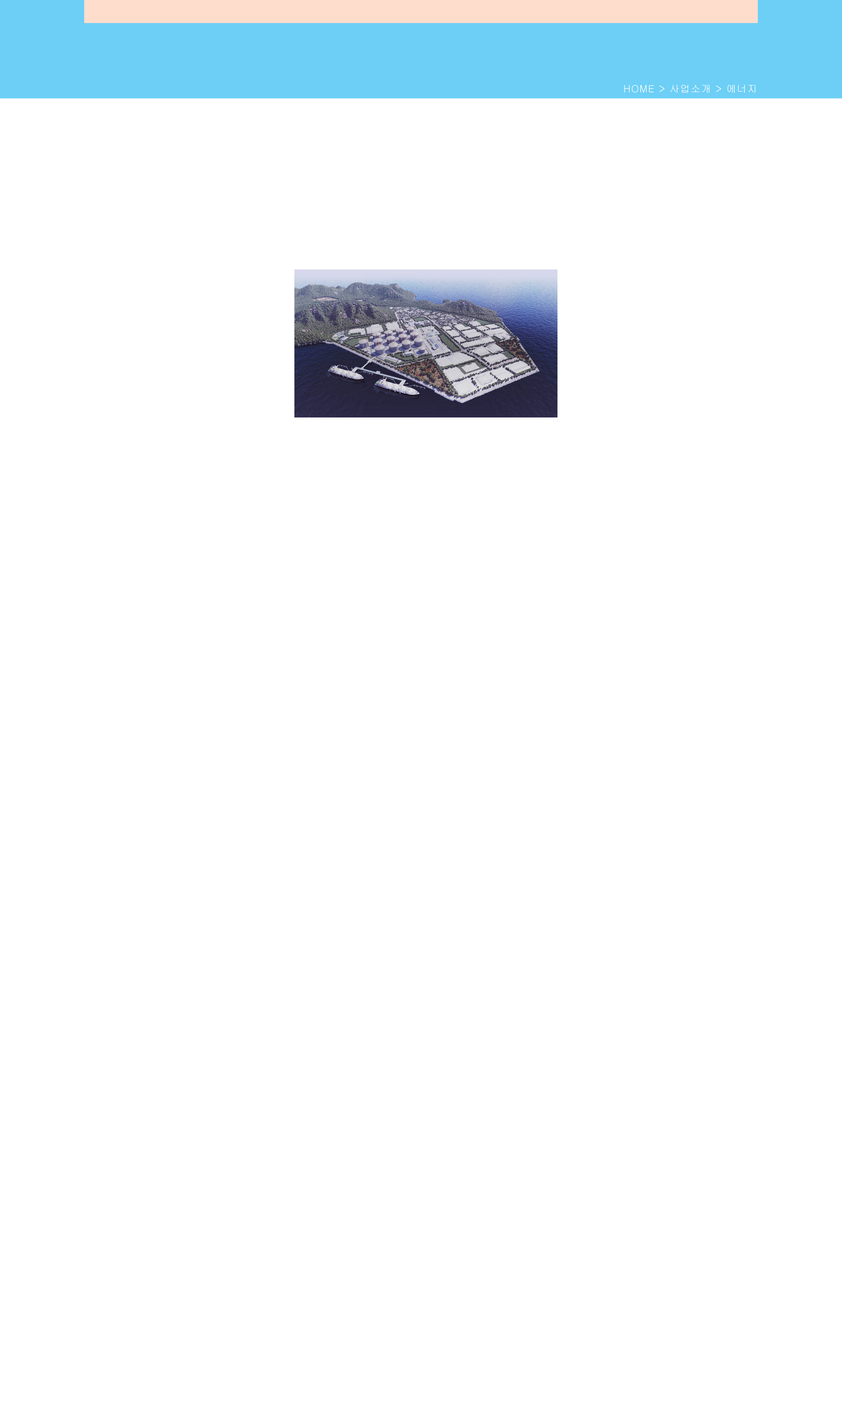
<style>
.page{position:relative;width:842px;height:1415px;background:#ffffff}
.page>*{position:absolute;margin:0}
.t1{font:9.9px "Gulim";letter-spacing:0.065em;color:#ffffff}
</style>
<div class="page">
<p class="t1" style="left:625px;top:85px;width:131px;height:8px">HOME &gt; 사업소개 &gt; 에너지</p>
</div>
